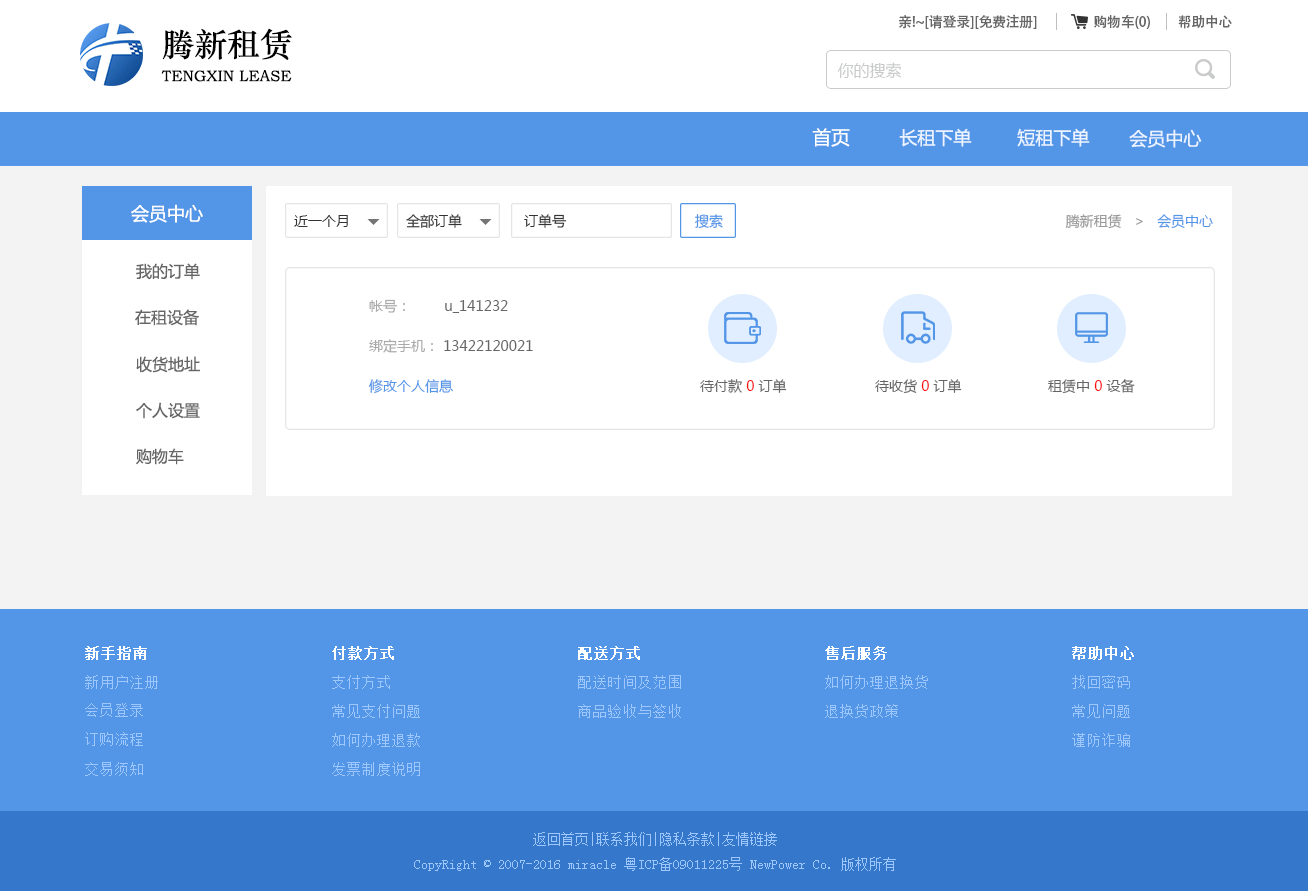
<style>
.page{position:relative;width:1308px;height:891px;background:#ffffff}
.page>*{position:absolute;margin:0}
.t1{font:14px "AdobeHeitiStd-Regular";letter-spacing:-0.02em;color:#666666}
.t2{font:32.6px "STZhongsong";color:#000000}
.t3{font:16px "MicrosoftYaHei";color:#c9caca}
.t4{font:15.5px "STZhongsong";color:#000000}
.t5{font:18.8px "MicrosoftYaHei";color:#ffffff}
.t6{font:18px "MicrosoftYaHei";color:#eaf3ff}
.t7{font:18px "MicrosoftYaHei";color:#fefefe}
.t8{font:14px "MicrosoftYaHei";color:#333333}
.t9{font:14px "MicrosoftYaHei";color:#5395e7}
.t10{font:14px "MicrosoftYaHei";color:#999999}
.t11{font:16px "MicrosoftYaHei";color:#666666}
.t12{font:14px "MicrosoftYaHei";color:#666666}
.t13{font:14px "MicrosoftYaHei";color:#aaaaaa}
.t14{font:14px "MicrosoftYaHei";color:#fe1010}
.t15{font:15px "SimSun";color:#ffffff;font-weight:bold}
.t16{font:15px "SimSun";color:#9ec8fd}
.t17{font:14px "SimSun";color:#9ec8fd}
</style>
<div class="page">
<p class="t1" style="left:899px;top:14px;width:138px;height:15px">亲!~[请登录][免费注册]</p>
<p class="t1" style="left:1094px;top:14px;width:56px;height:15px">购物车(0)</p>
<p class="t1" style="left:1178px;top:15px;width:54px;height:14px">帮助中心</p>
<p class="t2" style="left:162px;top:28px;width:130px;height:32px">腾新租赁</p>
<p class="t3" style="left:837px;top:62px;width:65px;height:16px">你的搜索</p>
<p class="t4" style="left:161px;top:70px;width:131px;height:12px">TENGXIN LEASE</p>
<p class="t5" style="left:812px;top:128px;width:38px;height:19px">首页</p>
<p class="t6" style="left:899px;top:128px;width:73px;height:19px">长租下单</p>
<p class="t6" style="left:1017px;top:128px;width:73px;height:19px">短租下单</p>
<p class="t6" style="left:1129px;top:129px;width:73px;height:19px">会员中心</p>
<p class="t7" style="left:131px;top:204px;width:72px;height:19px">会员中心</p>
<p class="t8" style="left:294px;top:215px;width:54px;height:12px">近一个月</p>
<p class="t8" style="left:406px;top:214px;width:56px;height:14px">全部订单</p>
<p class="t8" style="left:524px;top:214px;width:43px;height:14px">订单号</p>
<p class="t9" style="left:695px;top:214px;width:28px;height:15px">搜索</p>
<p class="t10" style="left:1065px;top:214px;width:148px;height:15px">腾新租赁   &gt;   <span class="t9">会员中心</span></p>
<p class="t11" style="left:136px;top:263px;width:64px;height:17px">我的订单</p>
<p class="t12" style="left:369px;top:299px;width:139px;height:14px"><span class="t13">帐号：        </span>u_141232</p>
<p class="t11" style="left:135px;top:309px;width:64px;height:17px">在租设备</p>
<p class="t12" style="left:369px;top:339px;width:164px;height:14px"><span class="t13">绑定手机： </span>13422120021</p>
<p class="t11" style="left:136px;top:356px;width:64px;height:17px">收货地址</p>
<p class="t9" style="left:369px;top:379px;width:84px;height:15px">修改个人信息</p>
<p class="t12" style="left:700px;top:379px;width:87px;height:14px">待付款 <span class="t14">0</span> 订单</p>
<p class="t12" style="left:875px;top:379px;width:87px;height:15px">待收货 <span class="t14">0</span> 订单</p>
<p class="t12" style="left:1048px;top:379px;width:87px;height:15px">租赁中 <span class="t14">0</span> 设备</p>
<p class="t11" style="left:136px;top:402px;width:64px;height:17px">个人设置</p>
<p class="t11" style="left:136px;top:448px;width:48px;height:17px">购物车</p>
<p class="t15" style="left:85px;top:646px;width:62px;height:14px">新手指南</p>
<p class="t15" style="left:332px;top:646px;width:62px;height:14px">付款方式</p>
<p class="t15" style="left:578px;top:646px;width:62px;height:14px">配送方式</p>
<p class="t15" style="left:825px;top:646px;width:62px;height:14px">售后服务</p>
<p class="t15" style="left:1072px;top:646px;width:62px;height:14px">帮助中心</p>
<p class="t16" style="left:85px;top:675px;width:73px;height:14px">新用户注册</p>
<p class="t16" style="left:332px;top:675px;width:58px;height:14px">支付方式</p>
<p class="t16" style="left:578px;top:675px;width:103px;height:14px">配送时间及范围</p>
<p class="t16" style="left:825px;top:675px;width:103px;height:14px">如何办理退换货</p>
<p class="t16" style="left:1072px;top:675px;width:58px;height:14px">找回密码</p>
<p class="t16" style="left:85px;top:703px;width:58px;height:14px">会员登录</p>
<p class="t16" style="left:332px;top:704px;width:88px;height:14px">常见支付问题</p>
<p class="t16" style="left:578px;top:704px;width:103px;height:14px">商品验收与签收</p>
<p class="t16" style="left:825px;top:704px;width:73px;height:14px">退换货政策</p>
<p class="t16" style="left:1072px;top:704px;width:58px;height:14px">常见问题</p>
<p class="t16" style="left:85px;top:732px;width:58px;height:14px">订购流程</p>
<p class="t16" style="left:332px;top:733px;width:88px;height:14px">如何办理退款</p>
<p class="t16" style="left:1072px;top:733px;width:58px;height:14px">谨防诈骗</p>
<p class="t16" style="left:85px;top:762px;width:58px;height:14px">交易须知</p>
<p class="t16" style="left:332px;top:762px;width:88px;height:14px">发票制度说明</p>
<p class="t17" style="left:414px;top:832px;width:482px;height:39px;text-align:center">返回首页|联系我们|隐私条款|友情链接<br>CopyRight © 2007-2016 miracle 粤ICP备09011225号 NewPower Co. 版权所有</p>
</div>
